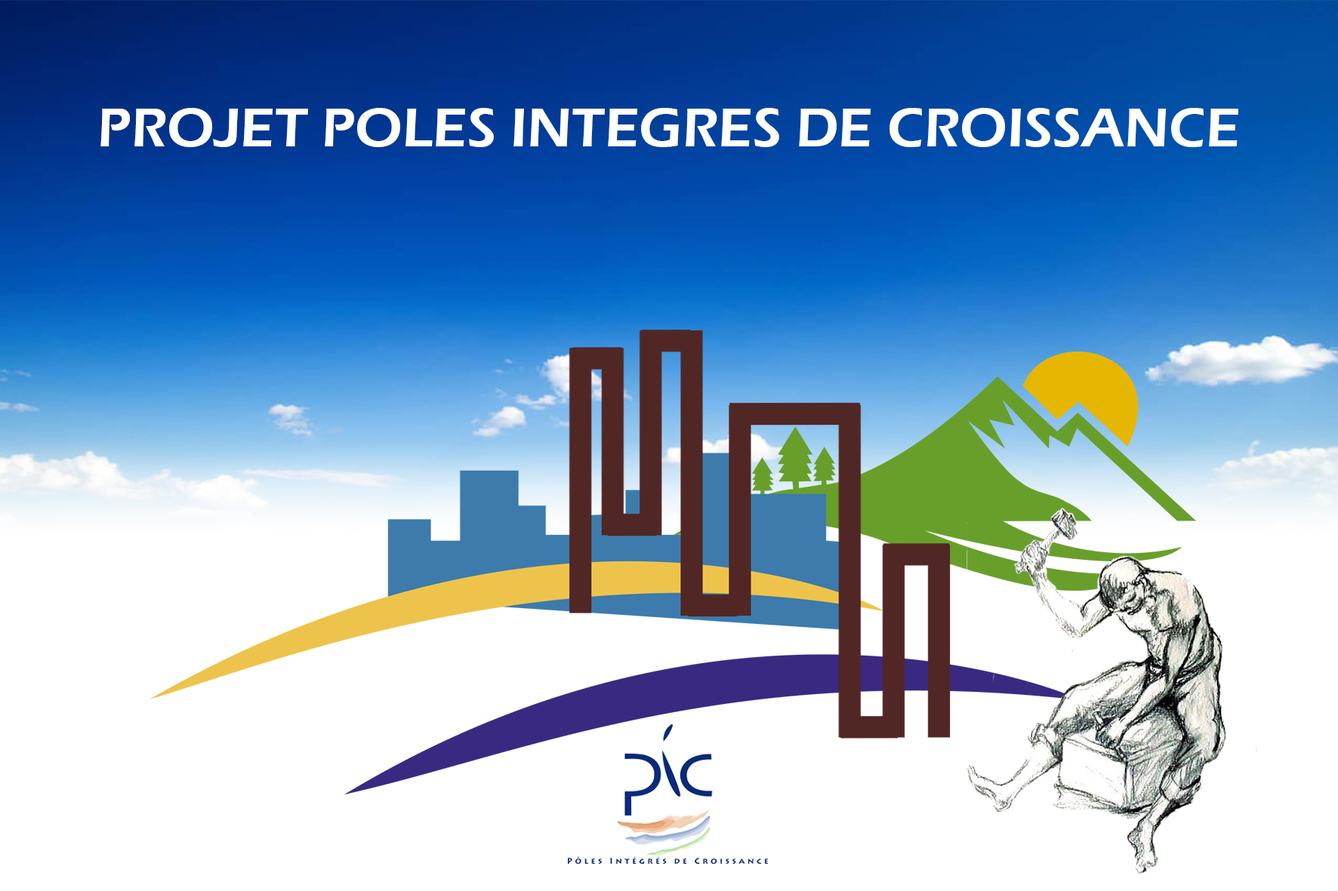
<style>
.page{position:relative;width:1338px;height:891px;background:#ffffff}
.page>*{position:absolute;margin:0}
.t1{font:56.6px "ErasITC-Demi";color:#ffffff}
</style>
<div class="page">
<p class="t1" style="left:100px;top:108px;width:1138px;height:39px">PROJET POLES INTEGRES DE CROISSANCE</p>
</div>
